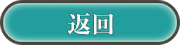
<style>
.page{position:relative;width:180px;height:45px}
.page>*{position:absolute;margin:0}
.t1{font:24px "RyuminPr6N-ExBold";color:#fef3f0}
</style>
<div class="page">
<p class="t1" style="left:67px;top:13px;width:46px;height:22px">返回</p>
</div>
